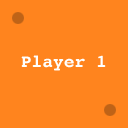
<style>
.page{position:relative;width:128px;height:128px;background:#ff841e}
.page>*{position:absolute;margin:0}
.t1{font:18px "Courier-Bold";color:#ffffff}
</style>
<div class="page">
<p class="t1" style="left:21px;top:55px;width:84px;height:16px">Player 2</p>
<p class="t1" style="left:21px;top:55px;width:85px;height:16px">Player 1</p>
</div>
